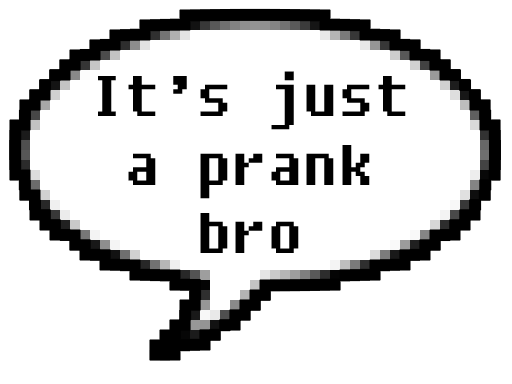
<style>
.page{position:relative;width:512px;height:384px;background:#ffffff}
.page>*{position:absolute;margin:0}
.t1{font:57px "Fixedsys";color:#000000}
</style>
<div class="page">
<p class="t1" style="left:98px;top:71px;width:308px;height:182px;text-align:center">It’s just<br>a prank<br>bro</p>
</div>
